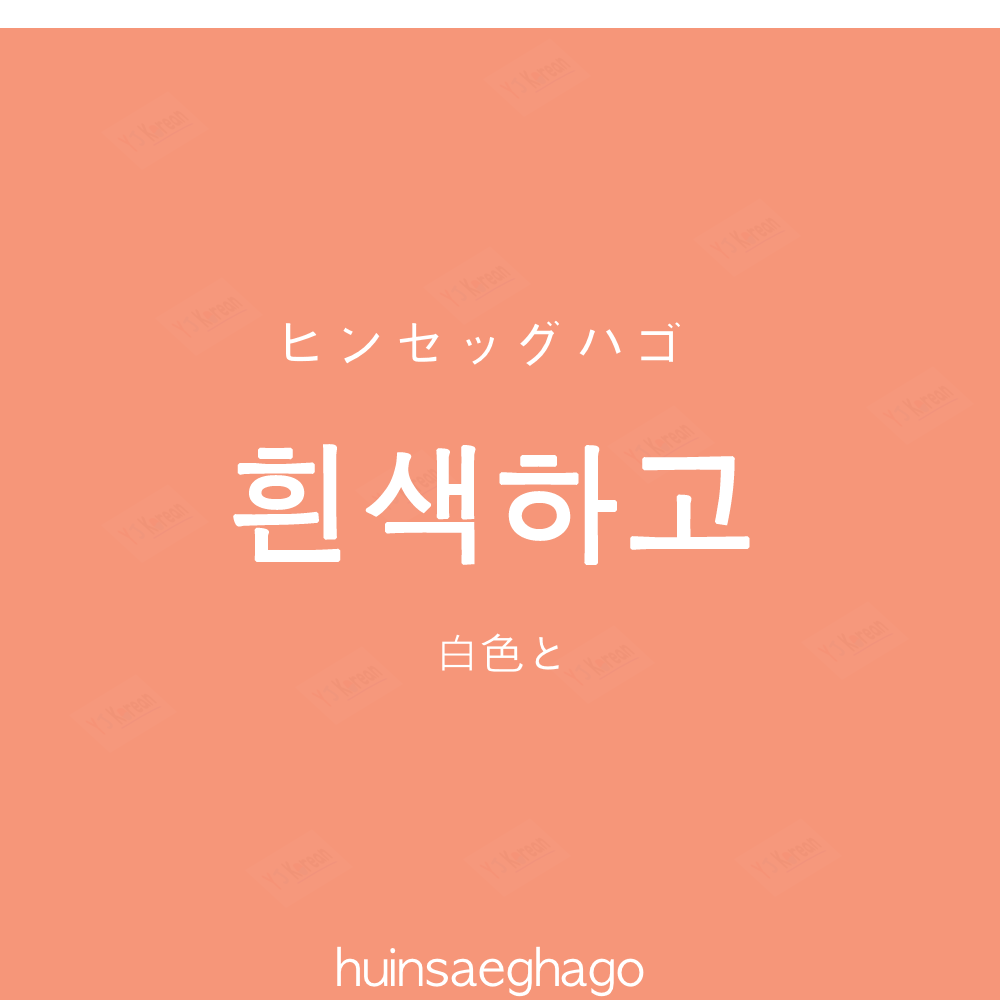
<style>
.page{position:relative;width:1000px;height:1000px;background:#f69679}
.page>*{position:absolute;margin:0}
.t1{font:60px "AppleGothic";color:#ffffff}
.t2{font:130px "AppleGothic";color:#ffffff;font-weight:bold}
.t3{font:45px "AppleGothic";color:#ffffff}
.t4{font:50px "AppleGothic";color:#ffffff}
</style>
<div class="page">
<p class="t1" style="left:285px;top:320px;width:395px;height:46px">ヒンセッグハゴ</p>
<p class="t2" style="left:233px;top:444px;width:517px;height:121px">흰색하고</p>
<p class="t3" style="left:442px;top:633px;width:117px;height:39px">白色と</p>
<p class="t4" style="left:337px;top:946px;width:307px;height:51px">huinsaeghago</p>
</div>
